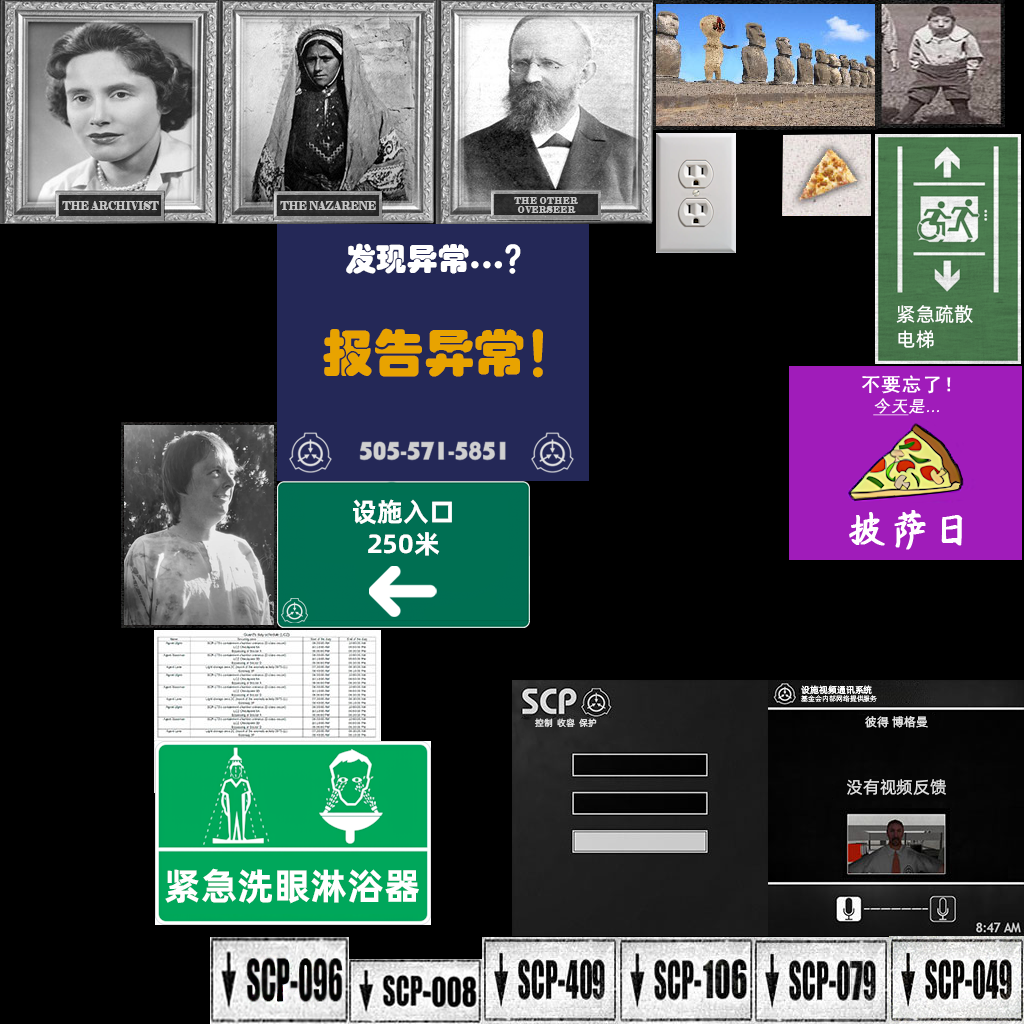
<style>
.page{position:relative;width:1024px;height:1024px;background:#000000}
.page>*{position:absolute;margin:0}
.t1{font:31.2px "STHupo";color:#ffffff}
.t2{font:19.4px/25px "AlibabaPuHuiTiR";color:#ffffff}
.t3{font:50.8px "STHupo";color:#e8a300}
.t4{font:19px "SimHei";color:#ffffff;font-weight:bold}
.t5{font:16.1px "DengXian";color:#ffffff;font-weight:bold;font-style:italic}
.t6{font:16.1px "DengXian";color:#ffffff;font-weight:bold;font-style:italic;text-decoration:underline}
.t7{font:26.5px/32px "AlibabaPuHuiTiB";color:#ffffff}
.t8{font:40.7px "YRDZST-Medium";color:#ffffff;font-weight:bold}
.t9{font:7px/5px "AlibabaPuHuiTiL";color:#ffffff}
.t10{font:9px/5px "AlibabaPuHuiTiR";color:#ffffff}
.t11{font:9px "AlibabaPuHuiTiR";color:#e0e0e0}
.t12{font:12px "AlibabaPuHuiTiR";color:#e0e0e0}
.t13{font:17px "AlibabaPuHuiTiR";color:#e0e0e0}
.t14{font:37.2px "AlibabaPuHuiTiB";color:#ffffff}
</style>
<div class="page">
<p class="t1" style="left:346px;top:243px;width:175px;height:31px">发现异常...？</p>
<p class="t2" style="left:896px;top:305px;width:77px;height:44px">紧急疏散<br>电梯</p>
<p class="t3" style="left:323px;top:328px;width:220px;height:50px">报告异常！</p>
<p class="t4" style="left:862px;top:375px;width:89px;height:19px">不要忘了！</p>
<p class="t5" style="left:873px;top:398px;width:66px;height:18px"><span class="t6">今天</span>是...</p>
<p class="t7" style="left:353px;top:499px;width:99px;height:57px;text-align:center">设施入口<br>250米</p>
<p class="t8" style="left:849px;top:510px;width:114px;height:40px">披萨日</p>
<p class="t9" style="left:801px;top:685px;width:76px;height:17px"><span class="t10">设施视频通讯系统<br><br></span>基金会内部网络提供服务</p>
<p class="t11" style="left:535px;top:718px;width:62px;height:10px">控制  收容  保护</p>
<p class="t12" style="left:865px;top:716px;width:63px;height:12px">彼得 博格曼</p>
<p class="t13" style="left:847px;top:779px;width:99px;height:16px">没有视频反馈</p>
<p class="t14" style="left:165px;top:868px;width:254px;height:36px">紧急洗眼淋浴器</p>
</div>
